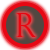
<style>
.page{position:relative;width:50px;height:50px}
.page>*{position:absolute;margin:0}
.t1{font:32.8px "PerpetuaTitlingMT-Light";color:#e70713}
</style>
<div class="page">
<p class="t1" style="left:16px;top:13px;width:21px;height:24px">R</p>
</div>
